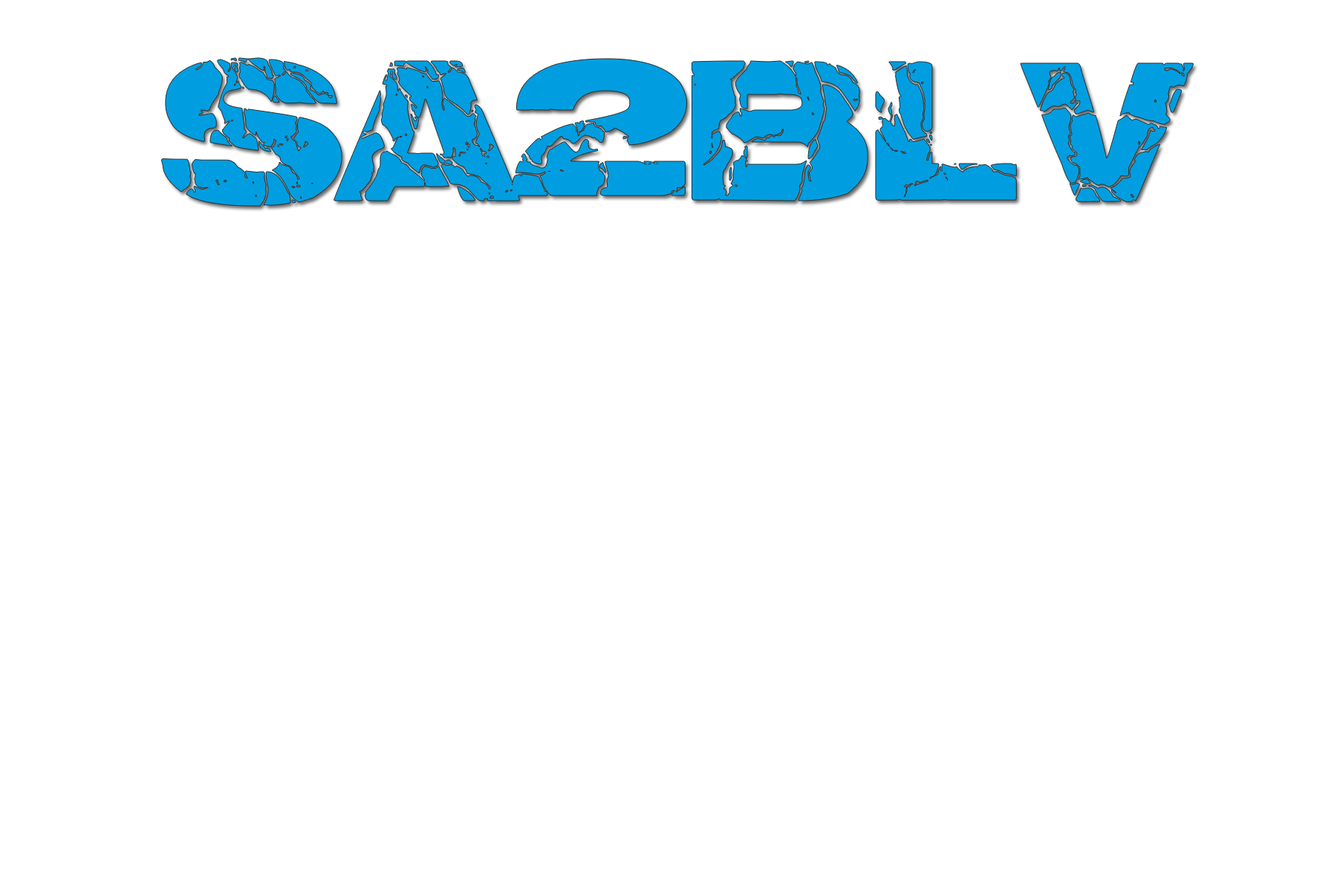
<style>
.page{position:relative;width:1337px;height:892px;background:#ffffff}
.page>*{position:absolute;margin:0}
.t1{font:148.6px "electrical";color:#009ee0}
</style>
<div class="page">
<p class="t1" style="left:161px;top:58px;width:1033px;height:148px">SA2BLV</p>
</div>
